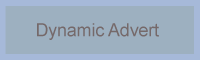
<style>
.page{position:relative;width:200px;height:60px;background:#9db0c0}
.page>*{position:absolute;margin:0}
.t1{font:18px "ArialMT";letter-spacing:-0.01em;color:#766a6b}
</style>
<div class="page">
<p class="t1" style="left:37px;top:23px;width:122px;height:17px">Dynamic Advert</p>
</div>
